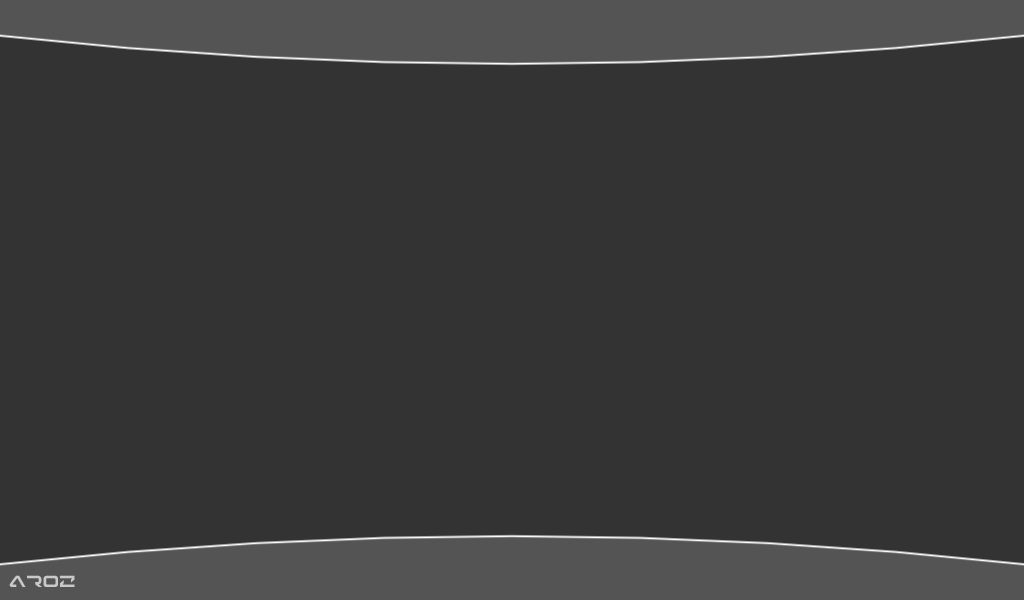
<style>
.page{position:relative;width:1024px;height:600px;background:#333333}
.page>*{position:absolute;margin:0}
.t1{font:24px "4114Blaster";color:#c9c9c9}
</style>
<div class="page">
<p class="t1" style="left:9px;top:575px;width:66px;height:12px">ArOZ</p>
</div>
